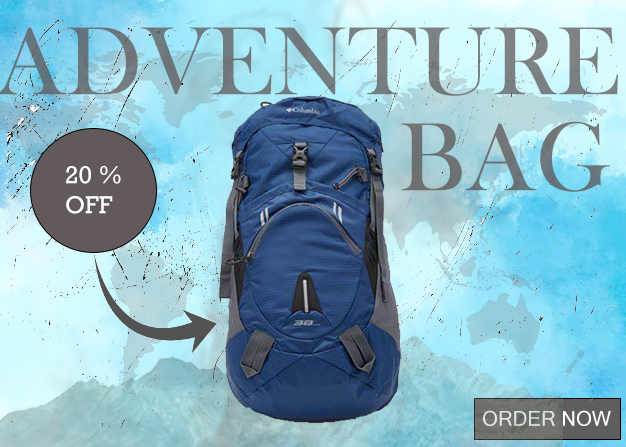
<style>
.page{position:relative;width:626px;height:447px}
.page>*{position:absolute;margin:0}
.t1{font:100px "BaskOldFace";color:#6e7376}
.t2{font:25px "Rockwell";color:#ffffff}
.t3{font:20.4px "MicrosoftSansSerif"}
</style>
<div class="page">
<p class="t1" style="left:401px;top:121px;width:209px;height:71px">BAG</p>
<p class="t2" style="left:66px;top:166px;width:55px;height:48px">20 %<br>OFF</p>
<p class="t3" style="left:483px;top:410px;width:128px;height:16px">ORDER NOW</p>
</div>
